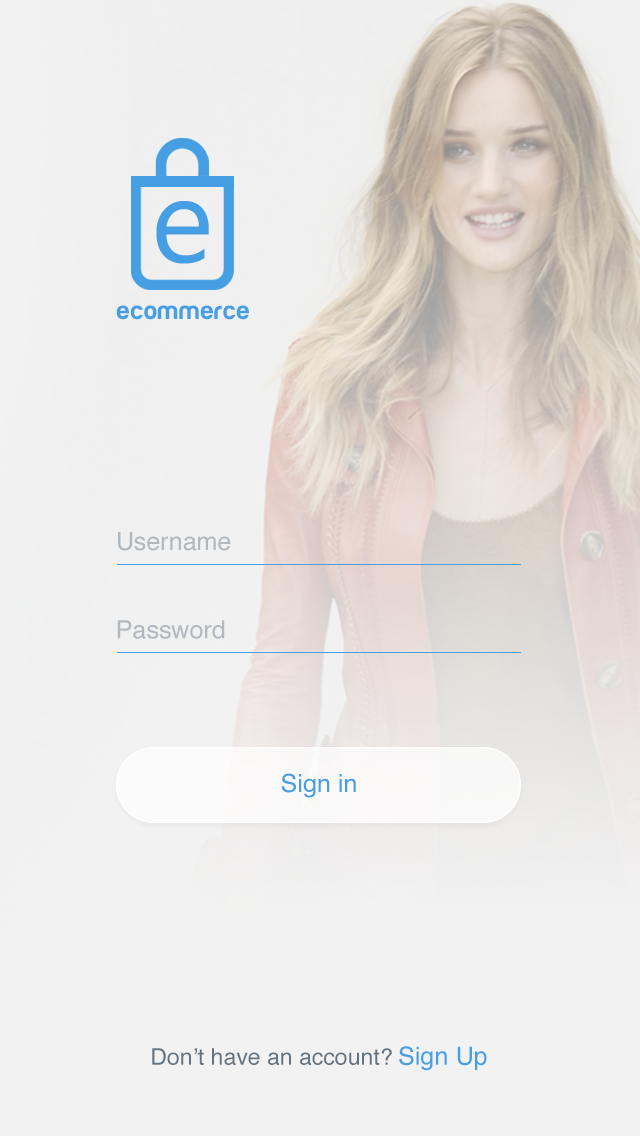
<style>
.page{position:relative;width:640px;height:1136px;background:#f2f2f2}
.page>*{position:absolute;margin:0}
.t1{font:119px "Gadugi";color:#469fe2}
.t2{font:25.3px "HarabaraMaisBold-HarabaraMaisBold";color:#469fe2}
.t3{font:25px "Helvetica";color:#b2b8be}
.t4{font:25px "Helvetica";color:#469fe2}
.t5{font:22.9px "Helvetica";color:#617381}
</style>
<div class="page">
<p class="t1" style="left:156px;top:201px;width:53px;height:63px">e</p>
<p class="t2" style="left:116px;top:305px;width:133px;height:15px">ecommerce</p>
<p class="t3" style="left:118px;top:532px;width:113px;height:19px">Username</p>
<p class="t3" style="left:117px;top:620px;width:108px;height:19px">Password</p>
<p class="t4" style="left:281px;top:773px;width:75px;height:25px">Sign in</p>
<p class="t5" style="left:152px;top:1046px;width:335px;height:25px">Don’t have an account? <span class="t4">Sign Up</span></p>
</div>
